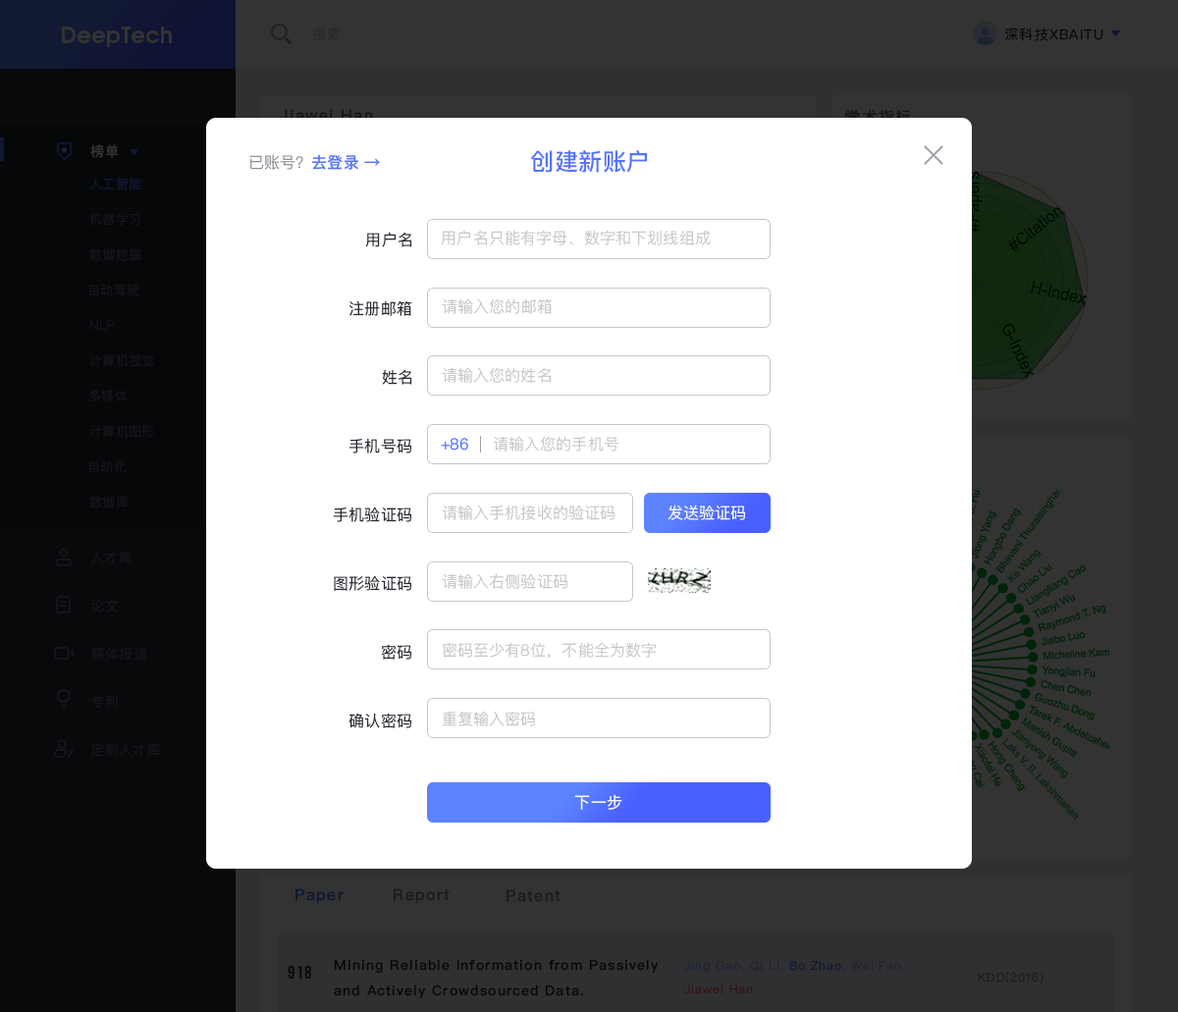
<style>
.page{position:relative;width:1178px;height:1012px;background:#ffffff}
.page>*{position:absolute;margin:0}
.t1{font:15.7px "PingFangSC-Light";letter-spacing:0.01em;color:#888991}
.t2{font:15.7px "PingFangSC-Medium";letter-spacing:0.01em;color:#5574ff}
.t3{font:23.6px "PingFangSC-Medium";letter-spacing:0.02em;color:#5574ff}
.t4{font:15.7px "PingFangSC-Regular";letter-spacing:0.01em;color:#282b33}
.t5{font:15.7px "PingFangSC-Light";letter-spacing:0.01em;color:#c5c7cb}
.t6{font:15.7px "PingFangSC-Regular";letter-spacing:0.01em;color:#5574ff}
.t7{font:15.7px "PingFangSC-Light";letter-spacing:0.01em;color:#ffffff}
.t8{font:15.7px "PingFangSC-Regular";letter-spacing:0.01em;color:#ffffff}
</style>
<div class="page">
<p class="t1" style="left:249px;top:154px;width:109px;height:16px">已账号？<span class="t2">去登录</span></p>
<p class="t2" style="left:364px;top:158px;width:16px;height:8px">→</p>
<p class="t3" style="left:530px;top:150px;width:117px;height:23px">创建新账户</p>
<p class="t4" style="left:365px;top:232px;width:47px;height:15px">用户名</p>
<p class="t5" style="left:441px;top:230px;width:270px;height:15px">用户名只能有字母、数字和下划线组成</p>
<p class="t4" style="left:349px;top:300px;width:63px;height:16px">注册邮箱</p>
<p class="t5" style="left:442px;top:298px;width:111px;height:16px">请输入您的邮箱</p>
<p class="t4" style="left:382px;top:369px;width:30px;height:16px">姓名</p>
<p class="t5" style="left:442px;top:367px;width:109px;height:16px">请输入您的姓名</p>
<p class="t4" style="left:349px;top:438px;width:62px;height:16px">手机号码</p>
<p class="t6" style="left:441px;top:438px;width:27px;height:13px">+86</p>
<p class="t5" style="left:493px;top:436px;width:126px;height:16px">请输入您的手机号</p>
<p class="t4" style="left:333px;top:507px;width:78px;height:15px">手机验证码</p>
<p class="t5" style="left:442px;top:505px;width:173px;height:15px">请输入手机接收的验证码</p>
<p class="t7" style="left:668px;top:505px;width:77px;height:15px">发送验证码</p>
<p class="t4" style="left:334px;top:575px;width:77px;height:16px">图形验证码</p>
<p class="t5" style="left:442px;top:573px;width:125px;height:16px">请输入右侧验证码</p>
<p class="t4" style="left:381px;top:644px;width:30px;height:16px">密码</p>
<p class="t5" style="left:442px;top:642px;width:215px;height:17px">密码至少有8位，不能全为数字</p>
<p class="t4" style="left:349px;top:713px;width:62px;height:15px">确认密码</p>
<p class="t5" style="left:442px;top:711px;width:93px;height:15px">重复输入密码</p>
<p class="t8" style="left:574px;top:794px;width:48px;height:16px">下一步</p>
</div>
